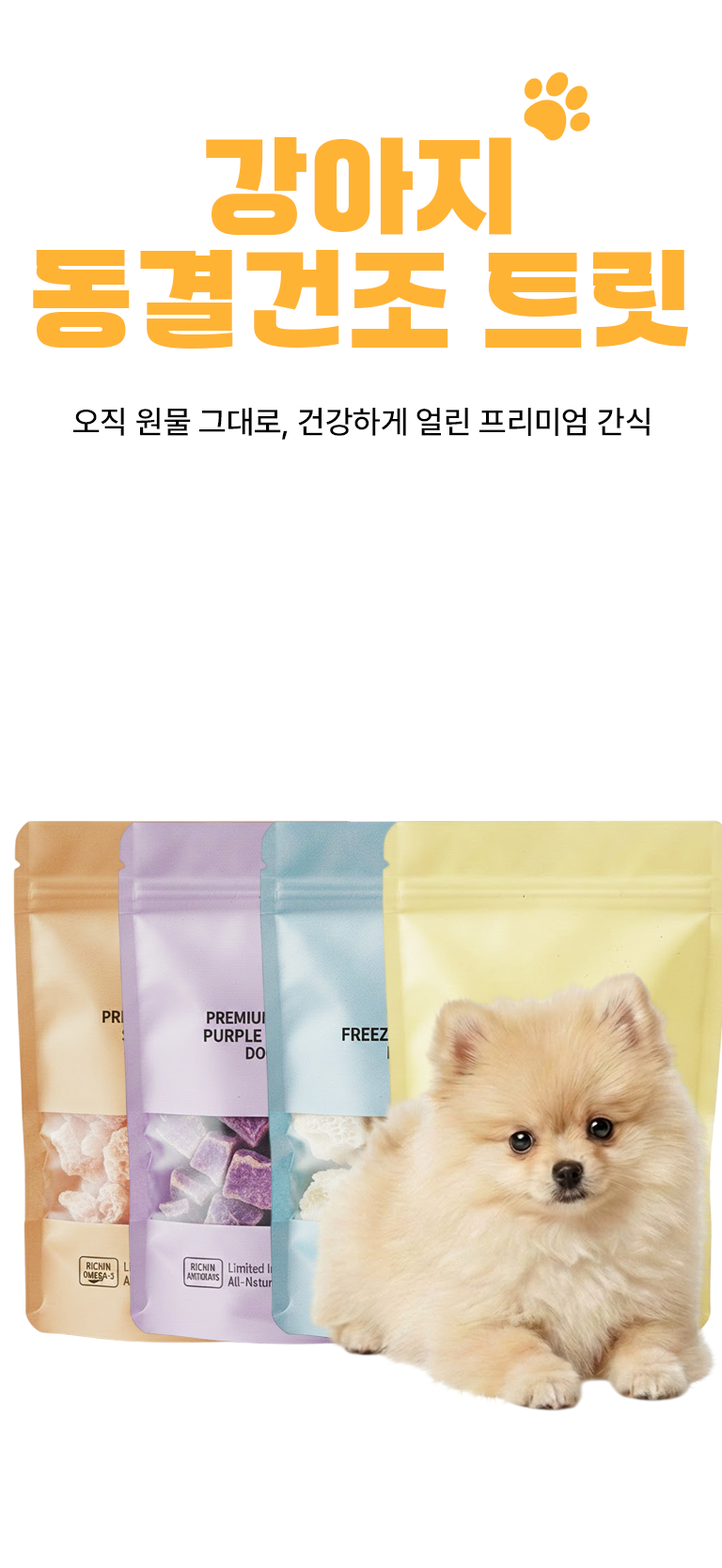
<style>
.page{position:relative;width:722px;height:1568px;background:#ffffff}
.page>*{position:absolute;margin:0}
.t1{font:112.7px/112.7px "WAGURI-TTF";letter-spacing:0.005em;color:#ffb334;text-transform:uppercase}
.t2{font:31.9px "Pretendard-Medium";color:#000000;text-transform:uppercase}
</style>
<div class="page">
<p class="t1" style="left:33px;top:137px;width:655px;height:212px;text-align:center">강아지<br>동결건조 트릿</p>
<p class="t2" style="left:73px;top:408px;width:576px;height:32px">오직 원물 그대로, 건강하게 얼린 프리미엄 간식</p>
</div>
